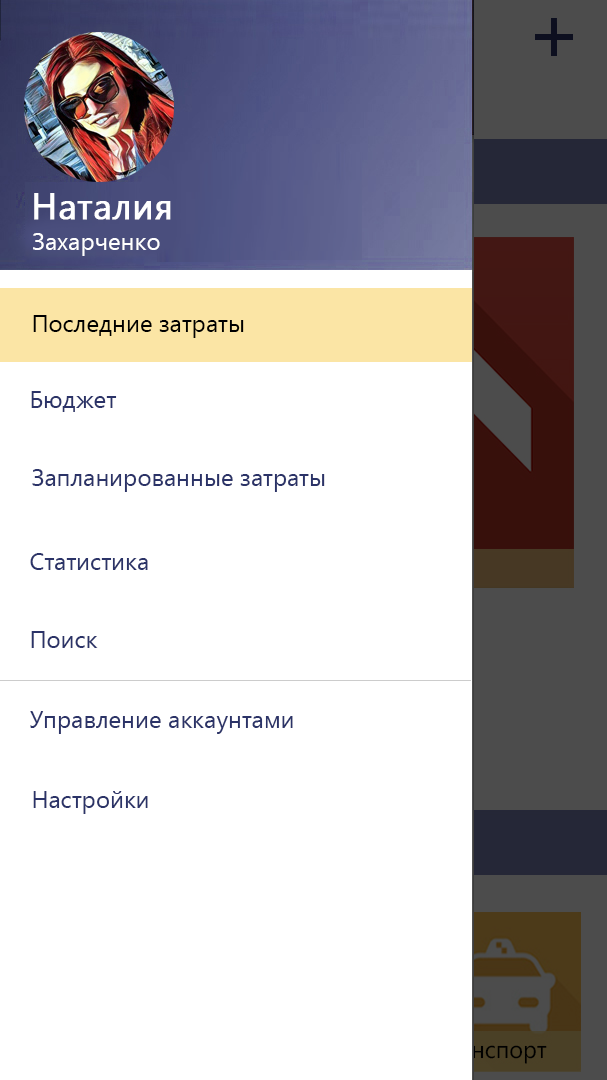
<style>
.page{position:relative;width:607px;height:1080px;background:#ffffff}
.page>*{position:absolute;margin:0}
.t1{font:36px "YuGothicUI-Regular";color:#ffffff;font-weight:bold}
.t2{font:24px "YuGothicUI-Regular";color:#ffffff}
.t3{font:24px "YuGothicUI-Regular";color:#000000}
.t4{font:24px "YuGothicUI-Regular";color:#2b3368}
</style>
<div class="page">
<p class="t1" style="left:34px;top:193px;width:137px;height:27px">Наталия</p>
<p class="t2" style="left:33px;top:233px;width:127px;height:23px">Захарченко</p>
<p class="t3" style="left:33px;top:315px;width:211px;height:23px">Последние затраты</p>
<p class="t4" style="left:31px;top:391px;width:86px;height:21px">Бюджет</p>
<p class="t4" style="left:32px;top:469px;width:293px;height:23px">Запланированные затраты</p>
<p class="t4" style="left:30px;top:553px;width:118px;height:17px">Статистика</p>
<p class="t4" style="left:31px;top:631px;width:67px;height:17px">Поиск</p>
<p class="t4" style="left:30px;top:711px;width:263px;height:23px">Управление аккаунтами</p>
<p class="t4" style="left:33px;top:791px;width:115px;height:23px">Настройки</p>
</div>
